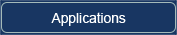
<style>
.page{position:relative;width:177px;height:35px;background:#183662}
.page>*{position:absolute;margin:0}
.t1{font:13.6px "ArialMT";color:#ffffff}
</style>
<div class="page">
<p class="t1" style="left:51px;top:12px;width:75px;height:14px">Applications</p>
</div>
